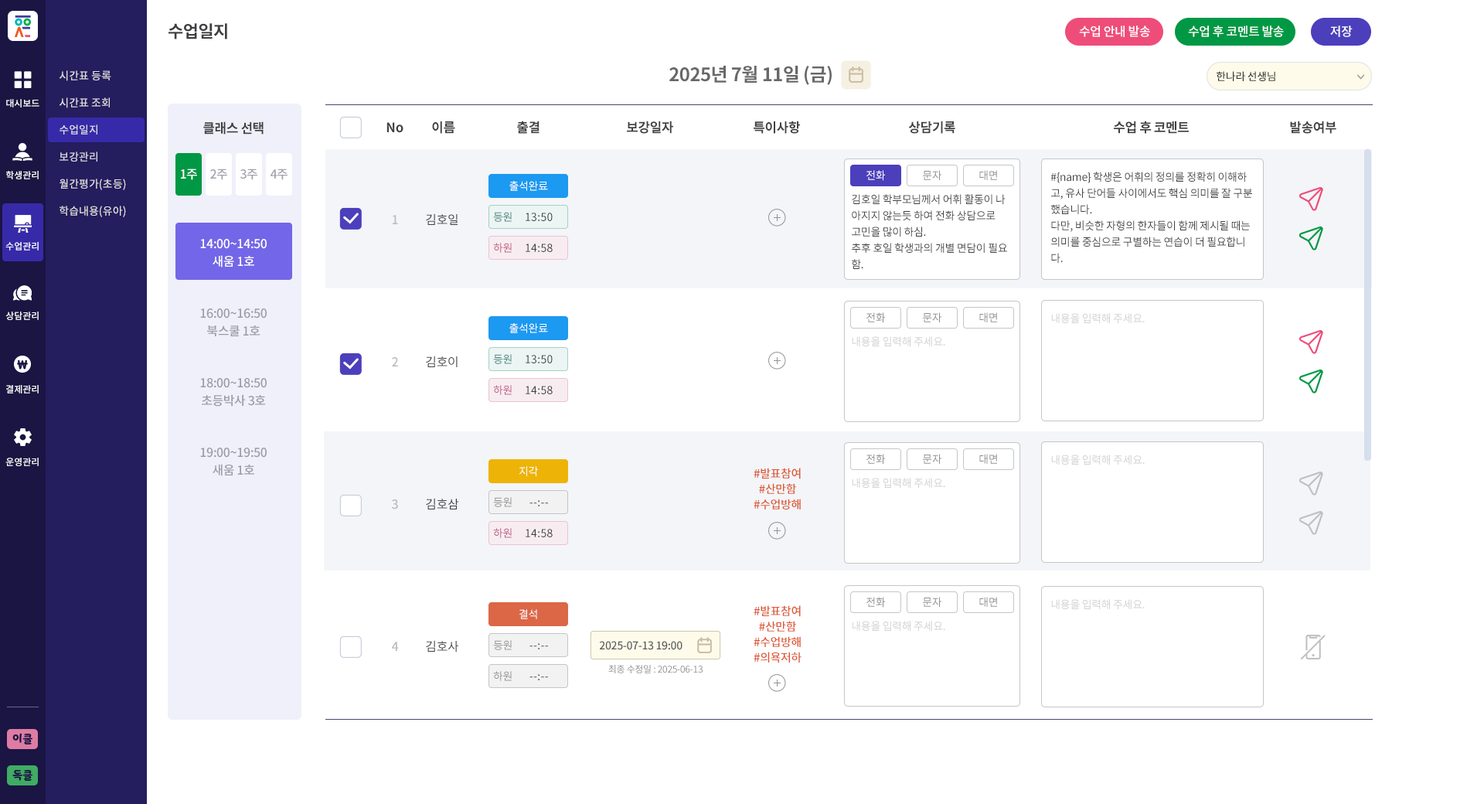
<style>
.page{position:relative;width:1484px;height:804px;background:#ffffff}
.page>*{position:absolute;margin:0}
.t1{font:17px "NotoSansCJKkr-Bold";letter-spacing:-0.025em;color:#3e3e43}
.t2{font:12.4px "NotoSansCJKkr-Medium";letter-spacing:-0.025em;color:#ffffff}
.t3{font:18.5px "NotoSansCJKkr-Bold";letter-spacing:-0.025em;color:#686868}
.t4{font:10.8px/27px "NotoSansCJKkr-Medium";color:#e1e1e1}
.t5{font:10.8px "NotoSansCJKkr-Medium";letter-spacing:-0.025em;color:#323232}
.t6{font:9.3px "NotoSansCJKkr-Medium";color:#ffffff}
.t7{font:13.1px "NotoSansCJKkr-Bold";letter-spacing:-0.025em;color:#404040}
.t8{font:12.4px "NotoSansCJKkr-Medium";letter-spacing:-0.025em;color:#a2a2ae}
.t9{font:10.8px "NotoSansCJKkr-Regular";letter-spacing:-0.025em;color:#ffffff}
.t10{font:10.8px "NotoSansCJKkr-Regular";letter-spacing:-0.025em;color:#8d8f91}
.t11{font:10.8px/16.2px "NotoSansCJKkr-Regular";letter-spacing:-0.025em;color:#404040}
.t12{font:12.4px/142.2px "NotoSansCJKkr-Medium";letter-spacing:-0.025em;color:#a8a8a8}
.t13{font:12.4px/142.2px "NotoSansCJKkr-Regular";letter-spacing:-0.025em;color:#404040}
.t14{font:10.8px "NotoSansCJKkr-Regular";letter-spacing:-0.025em;color:#418478}
.t15{font:10.8px "NotoSansCJKkr-Regular";letter-spacing:0.025em;color:#404040}
.t16{font:12.4px/69.5px "NotoSansCJKkr-Medium";letter-spacing:-0.025em;color:#9b9ba8}
.t17{font:12.4px/69.5px "NotoSansCJKkr-Medium";letter-spacing:-0.025em;color:#ffffff}
.t18{font:10.8px "NotoSansCJKkr-Regular";letter-spacing:-0.025em;color:#c05881}
.t19{font:10.8px "NotoSansCJKkr-Regular";letter-spacing:-0.025em;color:#d2d2d2}
.t20{font:11.6px/15.5px "NotoSansCJKkr-Medium";letter-spacing:-0.025em;color:#dc5733}
.t21{font:10.8px "NotoSansCJKkr-Regular";letter-spacing:-0.025em;color:#939393}
.t22{font:10.8px "NotoSansCJKkr-Medium";letter-spacing:-0.025em;color:#5a5a5a}
.t23{font:9.3px "NotoSansCJKkr-Regular";letter-spacing:-0.025em;color:#8d8d8d}
.t24{font:10.8px "YoonSoftSlime";color:#1a1543}
</style>
<div class="page">
<p class="t1" style="left:168px;top:23px;width:59px;height:16px">수업일지</p>
<p class="t2" style="left:1079px;top:26px;width:71px;height:11px">수업 안내 발송</p>
<p class="t2" style="left:1188px;top:26px;width:96px;height:11px">수업 후 코멘트 발송</p>
<p class="t2" style="left:1330px;top:26px;width:22px;height:11px">저장</p>
<p class="t3" style="left:669px;top:66px;width:162px;height:19px">2025년 7월 11일 (금)</p>
<p class="t4" style="left:60px;top:70px;width:66px;height:147px">시간표 등록<br>시간표 조회<br>수업일지<br>보강관리<br>월간평가(초등)<br>학습내용(유아)</p>
<p class="t5" style="left:1216px;top:71px;width:59px;height:10px">한나라 선생님</p>
<p class="t6" style="left:6px;top:99px;width:33px;height:8px">대시보드</p>
<p class="t7" style="left:203px;top:121px;width:61px;height:13px">클래스 선택</p>
<p class="t7" style="left:386px;top:122px;width:17px;height:11px">No</p>
<p class="t7" style="left:432px;top:121px;width:23px;height:13px">이름</p>
<p class="t7" style="left:517px;top:121px;width:22px;height:13px">출결</p>
<p class="t7" style="left:627px;top:121px;width:46px;height:13px">보강일자</p>
<p class="t7" style="left:753px;top:121px;width:47px;height:13px">특이사항</p>
<p class="t7" style="left:908px;top:121px;width:47px;height:13px">상담기록</p>
<p class="t7" style="left:1114px;top:121px;width:75px;height:13px">수업 후 코멘트</p>
<p class="t7" style="left:1290px;top:121px;width:46px;height:13px">발송여부</p>
<p class="t6" style="left:6px;top:171px;width:33px;height:8px">학생관리</p>
<p class="t2" style="left:181px;top:168px;width:16px;height:12px">1주</p>
<p class="t8" style="left:210px;top:168px;width:17px;height:12px">2주</p>
<p class="t8" style="left:240px;top:168px;width:17px;height:12px">3주</p>
<p class="t8" style="left:270px;top:168px;width:17px;height:12px">4주</p>
<p class="t9" style="left:866px;top:170px;width:19px;height:11px">전화</p>
<p class="t10" style="left:923px;top:170px;width:18px;height:10px">문자</p>
<p class="t10" style="left:979px;top:170px;width:18px;height:10px">대면</p>
<p class="t11" style="left:1050px;top:172px;width:202px;height:92px">#{name} 학생은 어휘의 정의를 정확히 이해하<br>고, 유사 단어들 사이에서도 핵심 의미를 잘 구분<br>했습니다.<br>다만, 비슷한 자형의 한자들이 함께 제시될 때는<br>의미를 중심으로 구별하는 연습이 더 필요합니<br>다.</p>
<p class="t9" style="left:509px;top:181px;width:39px;height:10px">출석완료</p>
<p class="t11" style="left:852px;top:194px;width:155px;height:75px">김호일 학부모님께서 어휘 활동이 나<br>아지지 않는듯 하여 전화 상담으로<br>고민을 많이 하심.<br>추후 호일 학생과의 개별 면담이 필요<br>함.</p>
<p class="t12" style="left:391px;top:215px;width:8px;height:436px;text-align:center;opacity:0.8">1<br>2<br>3<br>4</p>
<p class="t13" style="left:426px;top:213px;width:33px;height:439px">김호일<br>김호이<br>김호삼<br>김호사</p>
<p class="t14" style="left:493px;top:212px;width:19px;height:10px">등원</p>
<p class="t15" style="left:525px;top:213px;width:28px;height:8px">13:50</p>
<p class="t6" style="left:5px;top:242px;width:34px;height:8px">수업관리</p>
<p class="t16" style="left:200px;top:239px;width:67px;height:218px;text-align:center"><span class="t17">14:00~14:50<br></span>16:00~16:50<br>18:00~18:50<br>19:00~19:50</p>
<p class="t18" style="left:493px;top:243px;width:19px;height:10px">하원</p>
<p class="t15" style="left:525px;top:243px;width:28px;height:9px">14:58</p>
<p class="t16" style="left:202px;top:255px;width:64px;height:221px;text-align:center"><span class="t17">새움 1호<br></span>북스쿨 1호<br>초등박사 3호<br>새움 1호</p>
<p class="t6" style="left:5px;top:311px;width:34px;height:9px">상담관리</p>
<p class="t10" style="left:866px;top:312px;width:19px;height:11px">전화</p>
<p class="t10" style="left:923px;top:312px;width:18px;height:10px">문자</p>
<p class="t10" style="left:979px;top:312px;width:18px;height:10px">대면</p>
<p class="t19" style="left:1051px;top:313px;width:93px;height:11px">내용을 입력해 주세요.</p>
<p class="t9" style="left:509px;top:323px;width:39px;height:10px">출석완료</p>
<p class="t19" style="left:852px;top:336px;width:93px;height:11px">내용을 입력해 주세요.</p>
<p class="t14" style="left:493px;top:354px;width:19px;height:10px">등원</p>
<p class="t15" style="left:525px;top:355px;width:28px;height:8px">13:50</p>
<p class="t6" style="left:6px;top:385px;width:33px;height:8px">결제관리</p>
<p class="t18" style="left:493px;top:385px;width:19px;height:10px">하원</p>
<p class="t15" style="left:525px;top:386px;width:28px;height:8px">14:58</p>
<p class="t6" style="left:5px;top:457px;width:34px;height:9px">운영관리</p>
<p class="t10" style="left:866px;top:454px;width:19px;height:10px">전화</p>
<p class="t10" style="left:923px;top:454px;width:18px;height:10px">문자</p>
<p class="t10" style="left:979px;top:454px;width:18px;height:10px">대면</p>
<p class="t19" style="left:1051px;top:454px;width:93px;height:11px">내용을 입력해 주세요.</p>
<p class="t9" style="left:519px;top:466px;width:19px;height:10px">지각</p>
<p class="t20" style="left:753px;top:468px;width:48px;height:41px;text-align:center">#발표참여<br>#산만함<br>#수업방해</p>
<p class="t19" style="left:852px;top:478px;width:93px;height:10px">내용을 입력해 주세요.</p>
<p class="t21" style="left:493px;top:497px;width:19px;height:10px">등원</p>
<p class="t15" style="left:529px;top:500px;width:19px;height:6px">--:--</p>
<p class="t18" style="left:493px;top:528px;width:19px;height:10px">하원</p>
<p class="t15" style="left:525px;top:529px;width:28px;height:8px">14:58</p>
<p class="t20" style="left:753px;top:605px;width:48px;height:58px;text-align:center">#발표참여<br>#산만함<br>#수업방해<br>#의욕저하</p>
<p class="t10" style="left:866px;top:597px;width:19px;height:10px">전화</p>
<p class="t10" style="left:923px;top:597px;width:18px;height:10px">문자</p>
<p class="t10" style="left:979px;top:597px;width:18px;height:10px">대면</p>
<p class="t19" style="left:1051px;top:599px;width:93px;height:11px">내용을 입력해 주세요.</p>
<p class="t9" style="left:519px;top:609px;width:18px;height:10px">결석</p>
<p class="t19" style="left:852px;top:621px;width:93px;height:10px">내용을 입력해 주세요.</p>
<p class="t21" style="left:493px;top:640px;width:19px;height:10px">등원</p>
<p class="t22" style="left:599px;top:641px;width:83px;height:9px">2025-07-13 19:00</p>
<p class="t15" style="left:529px;top:643px;width:19px;height:6px">--:--</p>
<p class="t23" style="left:608px;top:665px;width:94px;height:8px">최종 수정일 : 2025-06-13</p>
<p class="t21" style="left:493px;top:671px;width:19px;height:10px">하원</p>
<p class="t15" style="left:529px;top:674px;width:19px;height:6px">--:--</p>
<p class="t24" style="left:12px;top:733px;width:20px;height:11px">이클</p>
<p class="t24" style="left:12px;top:770px;width:20px;height:10px">독클</p>
</div>
